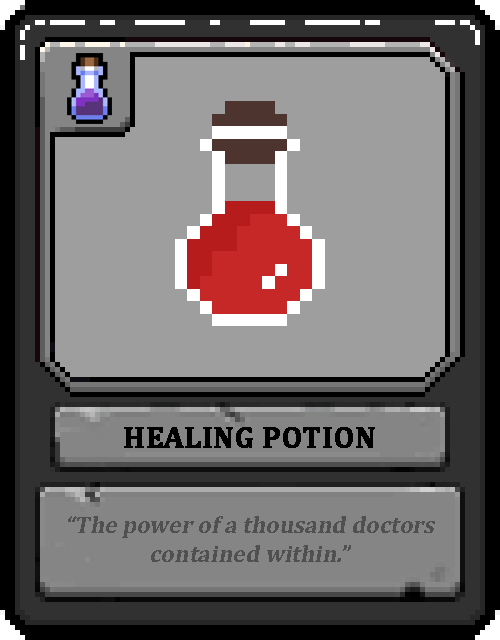
<style>
.page{position:relative;width:500px;height:640px;background:#9e9e9e}
.page>*{position:absolute;margin:0}
.t1{font:30px "Cambria-Bold";color:#000000;text-transform:uppercase;font-weight:bold}
.t2{font:24px "Cambria-Bold";color:#505050;font-style:italic}
</style>
<div class="page">
<p class="t1" style="left:124px;top:427px;width:251px;height:21px">Healing Potion</p>
<p class="t2" style="left:68px;top:516px;width:367px;height:46px;text-align:center">“The power of a thousand doctors contained within.”</p>
</div>
